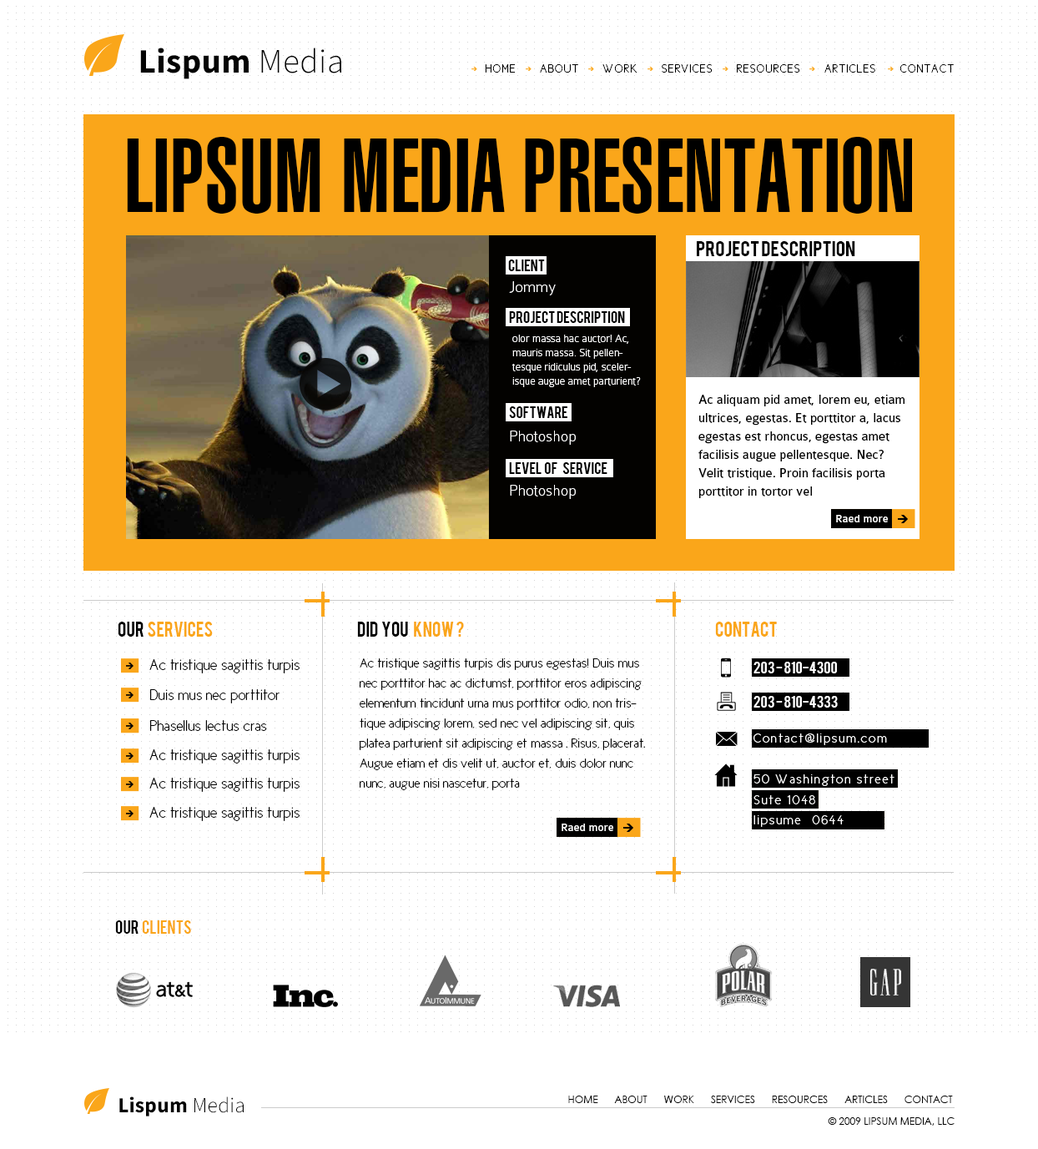
<style>
.page{position:relative;width:1038px;height:1149px;background:#ffffff}
.page>*{position:absolute;margin:0}
.t1{font:34.2px "SourceSansPro-Bold";letter-spacing:0.01em;color:#030303}
.t2{font:34.2px "SourceSansPro-Light";letter-spacing:0.01em;color:#030303}
.t3{font:11.7px "CicleFina";letter-spacing:0.08em;color:#000000;text-transform:uppercase}
.t4{font:103.5px "HelveticaLT-UltraCompressed";color:#000000;text-transform:uppercase}
.t5{font:16.8px "Bebas";color:#000000;text-transform:uppercase;scale:1.09 1}
.t6{font:13.3px "Bebas";color:#000000;text-transform:uppercase}
.t7{font:16.7px "Colaborate-Thin";color:#ffffff}
.t8{font:11.7px "Colaborate-Thin";color:#ffffff}
.t9{font:13.3px/18.4px "Colaborate-Regular";color:#000000}
.t10{font:11.7px "Colaborate-Regular";color:#ffffff}
.t11{font:16.8px "Bebas";color:#faa61a;text-transform:uppercase}
.t12{font:16.8px "Bebas";color:#000000;text-transform:uppercase}
.t13{font:15px "CicleFina";color:#000000}
.t14{font:13.3px/20px "CicleFina";color:#000000}
.t15{font:13.5px "Bebas";color:#ffffff;text-transform:uppercase}
.t16{font:13.5px "CicleFina";letter-spacing:0.1em;color:#ffffff}
.t17{font:15.2px "Bebas";color:#faa61a;text-transform:uppercase}
.t18{font:15.2px "Bebas";color:#000000;text-transform:uppercase}
.t19{font:21.6px "SourceSansPro-Bold";letter-spacing:0.01em;color:#030303}
.t20{font:21.6px "SourceSansPro-Light";letter-spacing:0.01em;color:#030303}
.t21{font:10px "CenturyGothic";color:#000000;text-transform:uppercase}
</style>
<div class="page">
<p class="t1" style="left:140px;top:48px;width:201px;height:31px">Lispum <span class="t2">Media</span></p>
<p class="t3" style="left:485px;top:64px;width:469px;height:9px">Home      about      Work      services      resources      articles      contact</p>
<p class="t4" style="left:127px;top:137px;width:785px;height:77px">Lipsum Media Presentation</p>
<p class="t5" style="left:697px;top:241px;width:158px;height:15px">Project description</p>
<p class="t6" style="left:508px;top:259px;width:37px;height:12px">Client</p>
<p class="t7" style="left:509px;top:281px;width:47px;height:14px">Jommy</p>
<p class="t6" style="left:509px;top:311px;width:116px;height:12px">Project description</p>
<p class="t8" style="left:511px;top:335px;width:130px;height:52px">olor massa hac auctor! Ac, mauris massa. Sit pellentesque ridiculus pid, scelerisque augue amet parturient?</p>
<p class="t9" style="left:698px;top:395px;width:206px;height:103px">Ac aliquam pid amet, lorem eu, etiam ultrices, egestas. Et porttitor a, lacus egestas est rhoncus, egestas amet facilisis augue pellentesque. Nec? Velit tristique. Proin facilisis porta porttitor in tortor vel</p>
<p class="t6" style="left:509px;top:406px;width:58px;height:12px">Software</p>
<p class="t7" style="left:510px;top:431px;width:66px;height:14px">Photoshop</p>
<p class="t6" style="left:509px;top:462px;width:98px;height:12px">Level  Of    Service</p>
<p class="t7" style="left:510px;top:485px;width:66px;height:14px">Photoshop</p>
<p class="t10" style="left:836px;top:515px;width:52px;height:7px">Raed more</p>
<p class="t11" style="left:118px;top:622px;width:95px;height:15px"><span class="t12">our  </span>services</p>
<p class="t12" style="left:357px;top:622px;width:107px;height:15px">Did  you <span class="t11">  know ?</span></p>
<p class="t11" style="left:715px;top:622px;width:62px;height:15px">Contact</p>
<p class="t13" style="left:149px;top:659px;width:151px;height:14px">Ac tristique sagittis turpis</p>
<p class="t14" style="left:359px;top:658px;width:286px;height:132px">Ac tristique sagittis turpis dis purus egestas! Duis mus nec porttitor hac ac dictumst, porttitor eros adipiscing elementum tincidunt urna mus porttitor odio, non tristique adipiscing lorem, sed nec vel adipiscing sit, quis platea parturient sit adipiscing et massa . Risus, placerat. Augue etiam et dis velit ut, auctor et, duis dolor nunc nunc, augue nisi nascetur, porta</p>
<p class="t15" style="left:753px;top:662px;width:84px;height:11px">203 - 810-4300</p>
<p class="t13" style="left:150px;top:689px;width:130px;height:14px">Duis mus nec porttitor</p>
<p class="t15" style="left:753px;top:696px;width:85px;height:12px">203 - 810-4333</p>
<p class="t13" style="left:150px;top:720px;width:117px;height:11px">Phasellus lectus cras</p>
<p class="t16" style="left:753px;top:733px;width:134px;height:12px">Contact@lipsum.com</p>
<p class="t13" style="left:149px;top:749px;width:151px;height:14px">Ac tristique sagittis turpis</p>
<p class="t13" style="left:149px;top:778px;width:151px;height:14px">Ac tristique sagittis turpis</p>
<p class="t16" style="left:753px;top:774px;width:141px;height:12px">50 Washington street</p>
<p class="t16" style="left:753px;top:795px;width:62px;height:9px">Sute 1048</p>
<p class="t13" style="left:149px;top:807px;width:151px;height:14px">Ac tristique sagittis turpis</p>
<p class="t16" style="left:753px;top:815px;width:91px;height:12px">lipsume  0644</p>
<p class="t10" style="left:562px;top:823px;width:51px;height:8px">Raed more</p>
<p class="t17" style="left:115px;top:920px;width:76px;height:14px"><span class="t18">our </span> Clients</p>
<p class="t19" style="left:119px;top:1096px;width:125px;height:20px">Lispum <span class="t20">Media</span></p>
<p class="t21" style="left:568px;top:1095px;width:385px;height:8px">Home      about      Work      services      resources      articles      contact</p>
<p class="t21" style="left:828px;top:1117px;width:126px;height:9px">© 2009 lipsum media, LLC</p>
</div>
